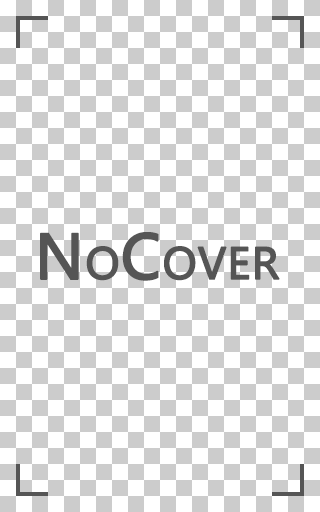
<style>
.page{position:relative;width:320px;height:512px;background:#ffffff}
.page>*{position:absolute;margin:0}
.t1{font:60px "MicrosoftYaHeiUI";color:#555555;font-variant:small-caps;font-weight:bold}
</style>
<div class="page">
<p class="t1" style="left:40px;top:232px;width:240px;height:49px">NoCover</p>
</div>
